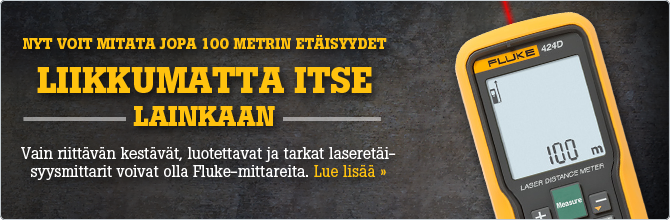
<style>
.page{position:relative;width:670px;height:220px}
.page>*{position:absolute;margin:0}
.t1{font:15px "BotonPro-Bold";color:#ffc20e;text-transform:uppercase}
.t2{font:36px "BotonPro-Bold";color:#ffc20e;text-transform:uppercase}
.t3{font:28px "BotonPro-Bold";color:#ffc20e;text-transform:uppercase}
.t4{font:16px/18px "BotonPro-Regular";color:#ffffff}
.t5{font:16px/18px "BotonPro-Regular";color:#ffc20e}
</style>
<div class="page">
<p class="t1" style="left:23px;top:35px;width:364px;height:91px;text-align:center">Nyt voit mitata jopa 100 metrin etäisyydet <span class="t2">liikkumatta itse </span><span class="t3">lainkaan</span></p>
<p class="t4" style="left:21px;top:147px;width:375px;height:33px;text-align:center">Vain riittävän kestävät, luotettavat ja tarkat laseretäisyysmittarit voivat olla Fluke-mittareita. <span class="t5">Lue lisää »</span></p>
</div>
